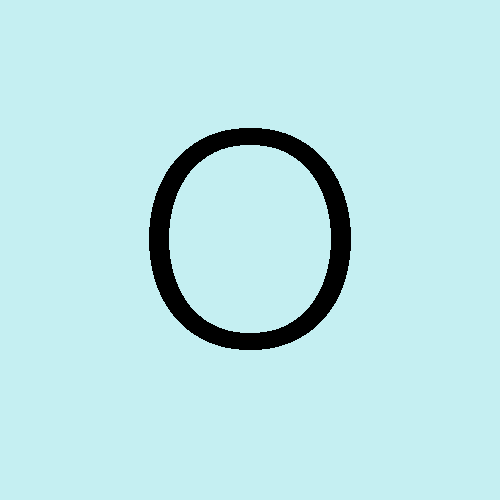
<style>
.page{position:relative;width:500px;height:500px;background:#c5eff2}
.page>*{position:absolute;margin:0}
.t1{font:300px "HelveticaNeue-Light";color:#000000}
</style>
<div class="page">
<p class="t1" style="left:149px;top:128px;width:202px;height:222px">O</p>
</div>
